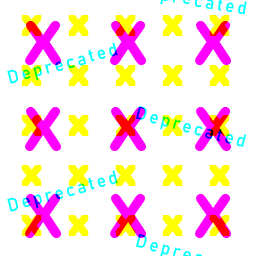
<style>
.page{position:relative;width:256px;height:256px;background:#ffffff}
.page>*{position:absolute;margin:0}
.t1{font:45px/50px "BerlinSansFBDemi-Bold";letter-spacing:0.6em;color:#ffff00;scale:0.96 1}
.t2{font:18px "Bahnschrift";letter-spacing:0.16em;color:#00ffff;scale:0.96 1}
.t3{font:18px "Bahnschrift";letter-spacing:0.16em;scale:0.96 1}
</style>
<div class="page">
<p class="t1" style="left:21px;top:15px;width:209px;height:221px;text-align:center">xxxxx<br>xxxxx<br>xxxxx<br>xxxxx<br>xxxxx</p>
<p class="t2" style="left:7px;top:42px;width:111px;height:42px;rotate:-15deg">Deprecated</p>
<p class="t3" style="left:136px;top:106px;width:110px;height:41px;rotate:15deg">Deprecated</p>
<p class="t2" style="left:7px;top:170px;width:111px;height:42px;rotate:-15deg">Deprecated</p>
</div>
